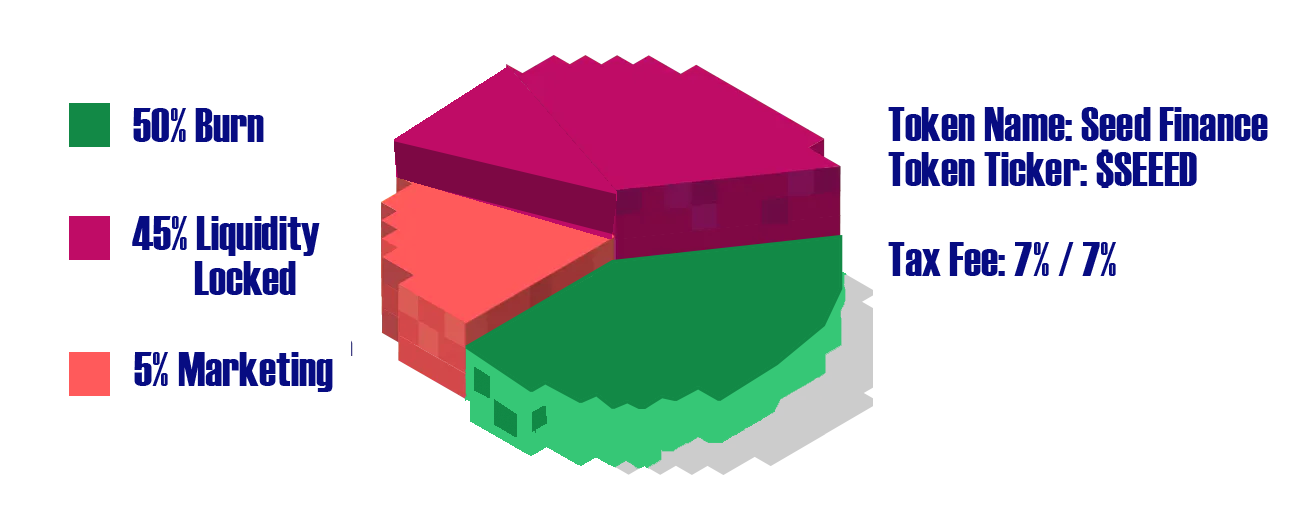
<style>
.page{position:relative;width:1301px;height:510px;background:#ffffff}
.page>*{position:absolute;margin:0}
.t1{font:48px "Haettenschweiler";color:#070c82}
.t2{font:48px/45px "Haettenschweiler";color:#070c82}
</style>
<div class="page">
<p class="t1" style="left:133px;top:108px;width:131px;height:34px">50% Burn</p>
<p class="t2" style="left:888px;top:107px;width:380px;height:169px">Token Name: Seed Finance<br>Token Ticker: $SEEED<br><br>Tax Fee: 7% / 7%</p>
<p class="t2" style="left:132px;top:216px;width:188px;height:79px">45% Liquidity<br>    Locked</p>
<p class="t1" style="left:134px;top:352px;width:199px;height:40px">5% Marketing</p>
</div>
